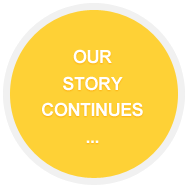
<style>
.page{position:relative;width:188px;height:188px;background:#fed136}
.page>*{position:absolute;margin:0}
.t1{font:18px "Arial-BoldMT";letter-spacing:-0.025em;color:#ffffff;text-transform:uppercase}
</style>
<div class="page">
<p class="t1" style="left:42px;top:49px;width:101px;height:94px;text-align:center">Our<br>Story<br>Continues<br>...</p>
</div>
